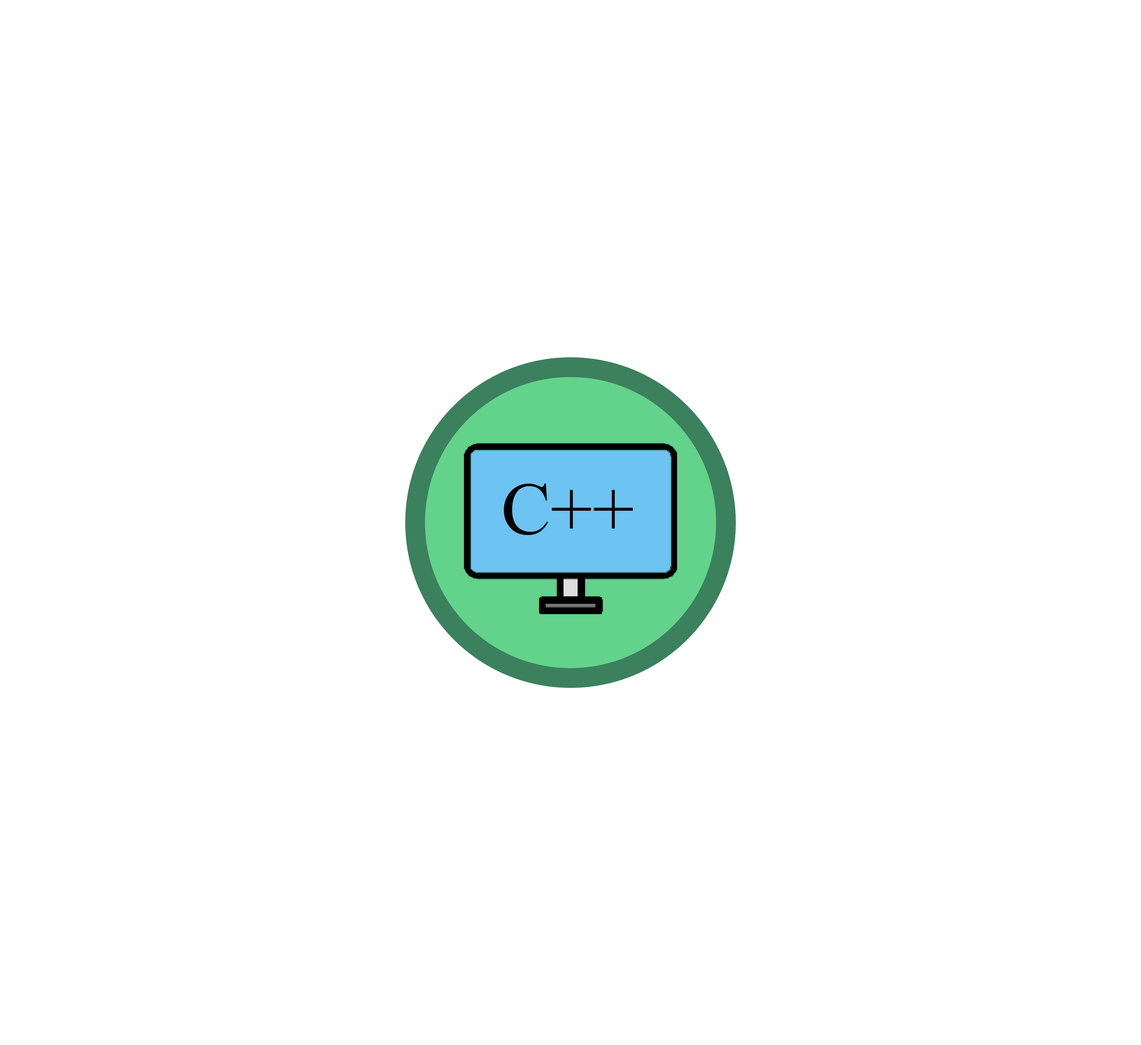
<style>
.page{position:relative;width:1141px;height:1045px;background:#ffffff}
.page>*{position:absolute;margin:0}
.t1{font:74.2px "Eurostile-Oblique";color:#000000}
</style>
<div class="page">
<p class="t1" style="left:504px;top:484px;width:129px;height:51px">C++</p>
</div>
